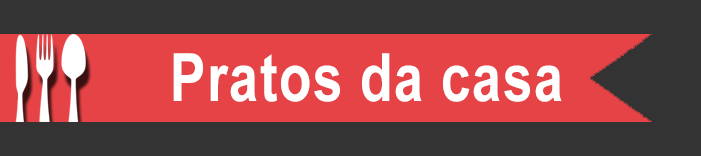
<style>
.page{position:relative;width:701px;height:156px;background:#333333}
.page>*{position:absolute;margin:0}
.t1{font:66.4px "Arial-BoldMT";letter-spacing:0.029em;color:#ffffff;scale:0.8 1}
</style>
<div class="page">
<p class="t1" style="left:173px;top:53px;width:389px;height:49px">Pratos da casa</p>
</div>
